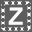
<style>
.page{position:relative;width:32px;height:32px;background:#5d5d5d}
.page>*{position:absolute;margin:0}
.t1{font:24px "Arial-BoldMT";color:#fbf9f9}
</style>
<div class="page">
<p class="t1" style="left:8px;top:7px;width:15px;height:18px">Z</p>
</div>
